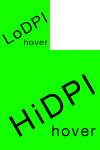
<style>
.page{position:relative;width:100px;height:150px;background:#12ff00}
.page>*{position:absolute;margin:0}
.t1{font:15.5px "HelveticaNeue";letter-spacing:0.1em;color:#000000}
.t2{font:8.1px "HelveticaNeue";letter-spacing:0.1em;color:#000000}
.t3{font:30.9px "HelveticaNeue";letter-spacing:0.1em;color:#000000}
.t4{font:15.2px "HelveticaNeue";letter-spacing:0.1em;color:#000000}
</style>
<div class="page">
<p class="t1" style="left:2px;top:12px;width:46px;height:33px;rotate:-30deg">LoDPI</p>
<p class="t2" style="left:24px;top:39px;width:24px;height:6px">hover</p>
<p class="t3" style="left:9px;top:74px;width:87px;height:63px;rotate:-30deg">HiDPI</p>
<p class="t4" style="left:52px;top:125px;width:44px;height:12px">hover</p>
</div>
